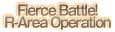
<style>
.page{position:relative;width:115px;height:32px;background:#ffffff}
.page>*{position:absolute;margin:0}
.t1{font:14px/12px "GothicMB101Pro-DeBold";letter-spacing:-0.08em;color:#816b53;scale:0.9 1}
</style>
<div class="page">
<p class="t1" style="left:5px;top:4px;width:106px;height:26px;text-align:center">Fierce Battle!<br>R-Area Operation</p>
</div>
